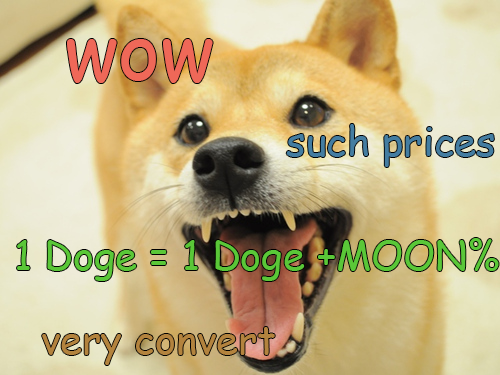
<style>
.page{position:relative;width:500px;height:375px}
.page>*{position:absolute;margin:0}
.t1{font:80px "ComicSansMS";color:#ef6858}
.t2{font:40px "ComicSansMS";color:#447da1}
.t3{font:40px "ComicSansMS";color:#5ac738}
.t4{font:40px "ComicSansMS";color:#b3833e}
</style>
<div class="page">
<p class="t1" style="left:67px;top:39px;width:146px;height:44px">wow</p>
<p class="t2" style="left:286px;top:124px;width:208px;height:43px">such prices</p>
<p class="t3" style="left:17px;top:238px;width:482px;height:43px">1 Doge = 1 Doge +MOON%</p>
<p class="t4" style="left:42px;top:327px;width:233px;height:38px">very convert</p>
</div>
